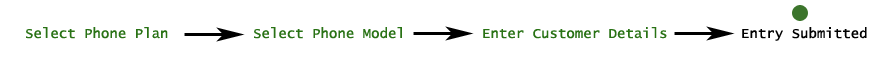
<style>
.page{position:relative;width:876px;height:62px;background:#ffffff}
.page>*{position:absolute;margin:0}
.t1{font:14px "LucidaConsole";color:#297215}
.t2{font:14px "LucidaConsole";color:#000000}
</style>
<div class="page">
<p class="t1" style="left:26px;top:27px;width:142px;height:12px">Select Phone Plan</p>
<p class="t1" style="left:254px;top:27px;width:148px;height:12px">Select Phone Model</p>
<p class="t1" style="left:483px;top:27px;width:184px;height:12px">Enter Customer Details</p>
<p class="t2" style="left:742px;top:27px;width:125px;height:14px">Entry Submitted</p>
</div>
